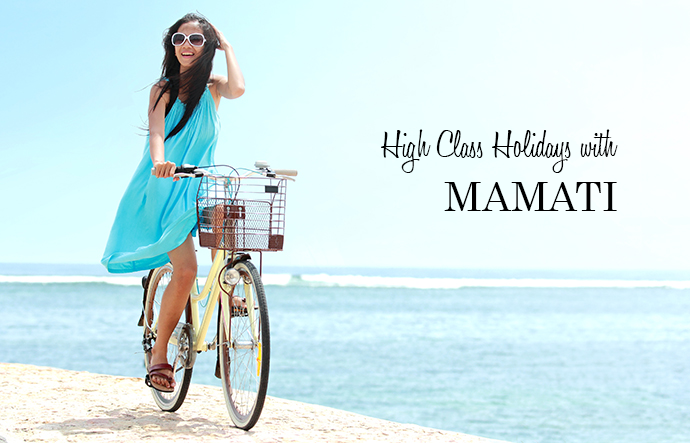
<style>
.page{position:relative;width:690px;height:443px}
.page>*{position:absolute;margin:0}
.t1{font:40px "HoneyScript-Light";color:#000000}
.t2{font:40px "Century";color:#000000}
</style>
<div class="page">
<p class="t1" style="left:381px;top:129px;width:237px;height:44px">High Class Holidays with</p>
<p class="t2" style="left:444px;top:182px;width:173px;height:29px">MAMATI</p>
</div>
